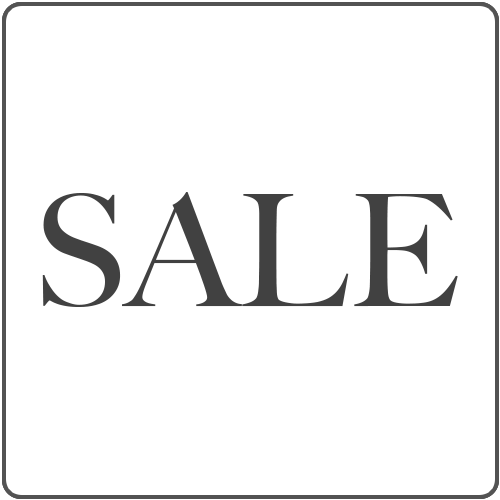
<style>
.page{position:relative;width:500px;height:500px;background:#ffffff}
.page>*{position:absolute;margin:0}
.t1{font:155.2px "BigCaslon-Medium";color:#333333}
</style>
<div class="page">
<p class="t1" style="left:42px;top:192px;width:416px;height:115px;opacity:0.93">SALE</p>
</div>
